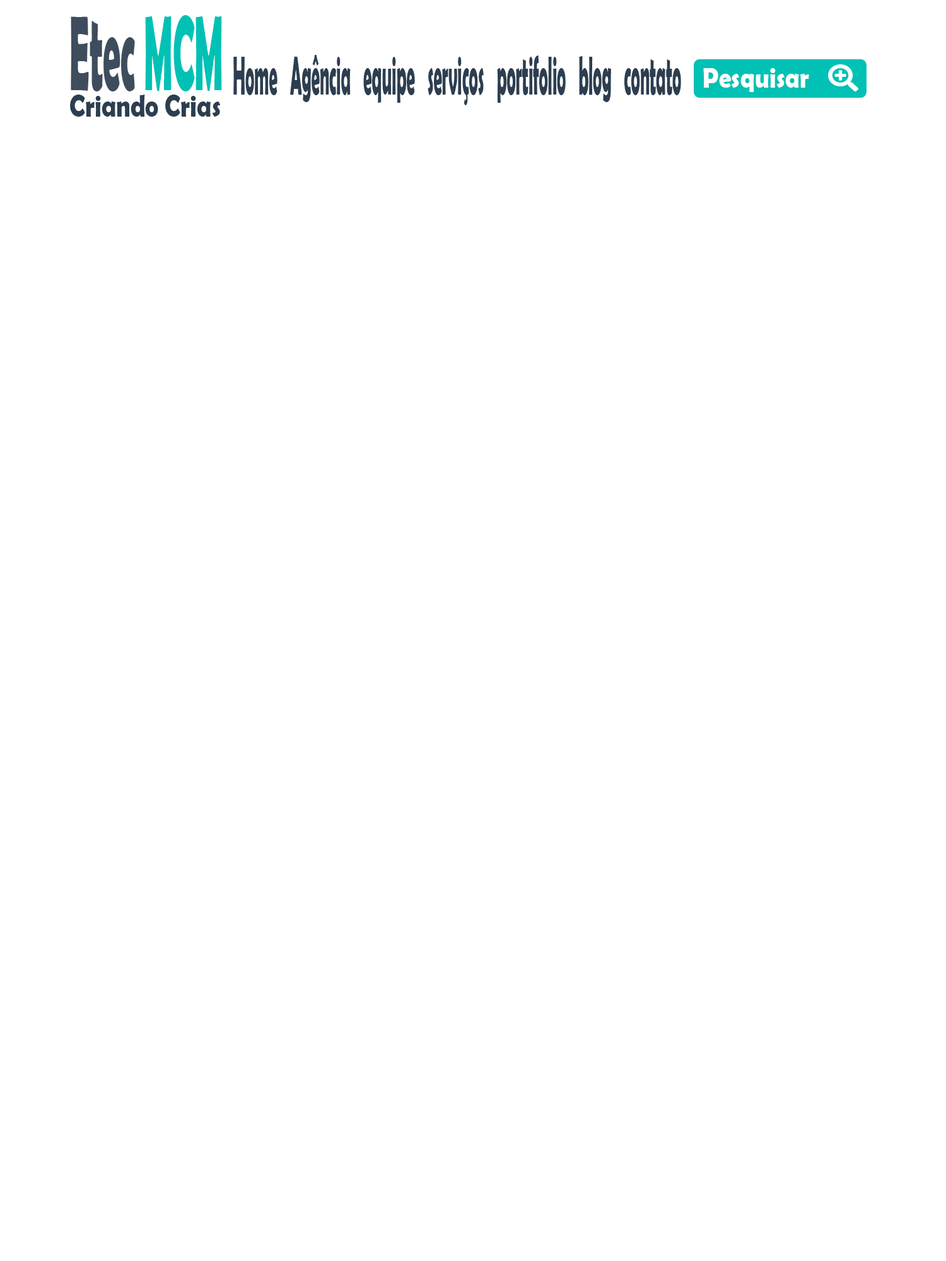
<style>
.page{position:relative;width:946px;height:1261px;background:#ffffff}
.page>*{position:absolute;margin:0}
.t1{font:107.2px "BerlinSansFBDemi-Bold";color:#3e4d5d;scale:0.33 1}
.t2{font:107.2px "BerlinSansFBDemi-Bold";color:#01c1b5;scale:0.33 1}
.t3{font:54.8px "BerlinSansFBDemi-Bold";color:#2c3e50;scale:0.31 1}
.t4{font:28.3px "BerlinSansFBDemi-Bold";color:#ffffff;scale:0.88 1}
.t5{font:30.7px "BerlinSansFBDemi-Bold";color:#2c3e50;scale:0.82 1}
</style>
<div class="page">
<p class="t1" style="left:71px;top:15px;width:151px;height:76px">Etec <span class="t2">MCM</span></p>
<p class="t3" style="left:233px;top:55px;width:448px;height:50px">Home   Agência   equipe   serviços   portifolio   blog   contato</p>
<p class="t4" style="left:703px;top:68px;width:106px;height:24px">Pesquisar</p>
<p class="t5" style="left:70px;top:95px;width:150px;height:22px">Criando Crias</p>
</div>
